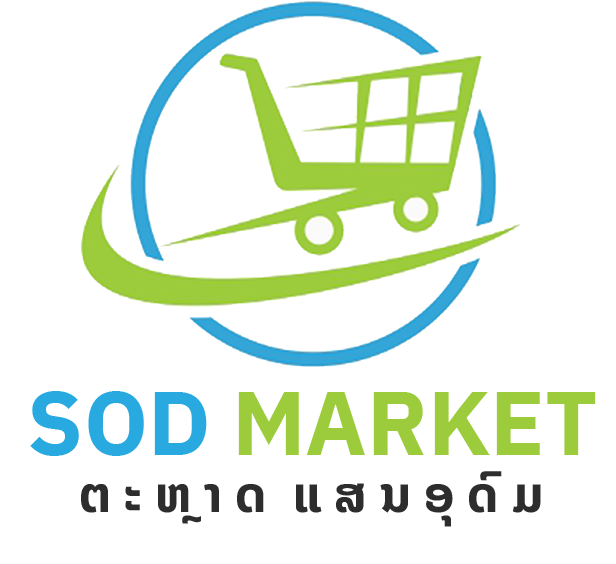
<style>
.page{position:relative;width:616px;height:564px;background:#ffffff}
.page>*{position:absolute;margin:0}
.t1{font:90px "IBMPlexSans-Bold";color:#9ccc3c}
.t2{font:90px "IBMPlexSans-Bold";color:#28a9df}
.t3{font:50px "NotoSansLao-Bold";color:#2d2d2d}
</style>
<div class="page">
<p class="t1" style="left:30px;top:391px;width:566px;height:65px"><span class="t2">SOD </span>MARKET</p>
<p class="t3" style="left:81px;top:471px;width:460px;height:56px">ຕ ະ ຫ ຼາ ດ  ແ ສ ນ ອຸ ດົ ມ</p>
</div>
